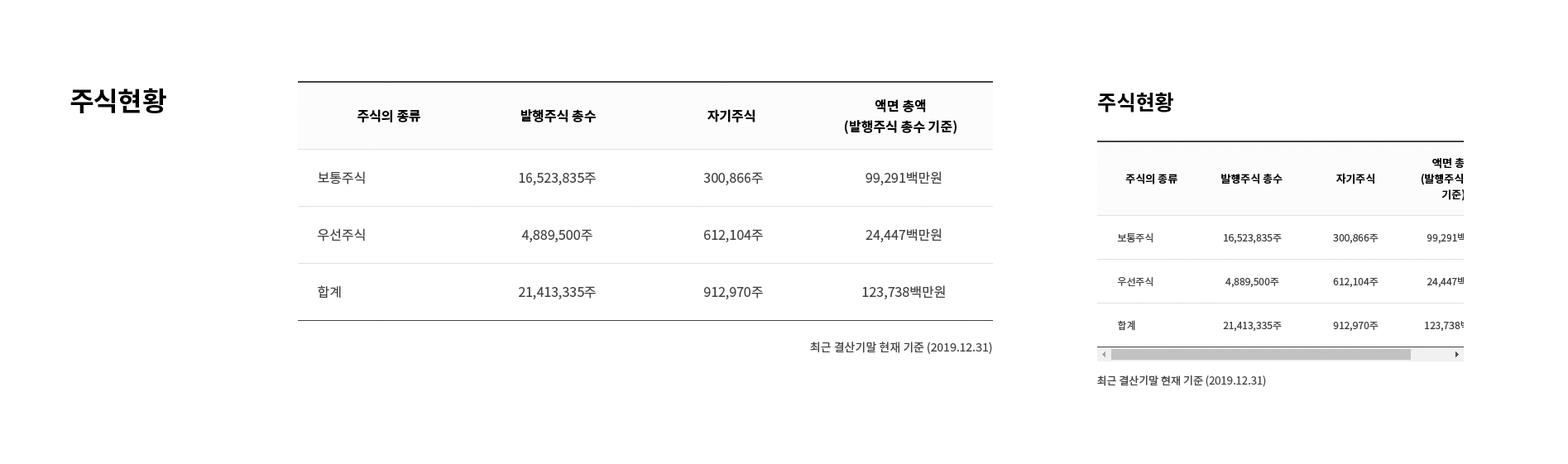
<style>
.page{position:relative;width:1568px;height:464px;background:#ffffff}
.page>*{position:absolute;margin:0}
.t1{font:26.5px "NotoSansKR-Bold";color:#040000}
.t2{font:13.2px/20.7px "NotoSansKR-Bold";color:#040000}
.t3{font:20.7px "NotoSansKR-Bold";color:#040000}
.t4{font:13.2px "NotoSansKR-Bold";color:#040000}
.t5{font:10.8px/15.7px "NotoSansKR-Bold";color:#040000}
.t6{font:13.2px/57.1px "NotoSansKR-Regular";color:#434343}
.t7{font:10.8px "NotoSansKR-Bold";color:#040000}
.t8{font:9.9px/43.9px "NotoSansKR-Regular";color:#434343}
.t9{font:9.9px/43.9px "NotoSansKR-Regular"}
.t10{font:11.6px "NotoSansKR-Regular";color:#434343}
.t11{font:10.8px "NotoSansKR-Regular";color:#434343}
</style>
<div class="page">
<p class="t1" style="left:70px;top:88px;width:96px;height:25px">주식현황</p>
<p class="t2" style="left:845px;top:99px;width:112px;height:35px;text-align:center">액면 총액<br>(발행주식 총수 기준)</p>
<p class="t3" style="left:1098px;top:92px;width:75px;height:21px">주식현황</p>
<p class="t4" style="left:357px;top:109px;width:63px;height:13px">주식의 종류</p>
<p class="t4" style="left:520px;top:109px;width:76px;height:13px">발행주식 총수</p>
<p class="t4" style="left:707px;top:109px;width:48px;height:13px">자기주식</p>
<p class="t5" style="left:1422px;top:158px;width:64px;height:43px;text-align:center">액면 총액<br>(발행주식 총수<br>기준)</p>
<p class="t6" style="left:317px;top:171px;width:48px;height:127px;text-align:justify">보통주식<br>우선주식<br>합계</p>
<p class="t6" style="left:519px;top:172px;width:77px;height:128px;text-align:center">16,523,835주<br>4,889,500주<br>21,413,335주</p>
<p class="t6" style="left:703px;top:172px;width:60px;height:128px;text-align:center">300,866주<br>612,104주<br>912,970주</p>
<p class="t6" style="left:862px;top:171px;width:83px;height:129px;text-align:center">99,291백만원<br>24,447백만원<br>123,738백만원</p>
<p class="t7" style="left:1125px;top:174px;width:52px;height:11px">주식의 종류</p>
<p class="t7" style="left:1221px;top:174px;width:62px;height:10px">발행주식 총수</p>
<p class="t7" style="left:1336px;top:173px;width:38px;height:12px">자기주식</p>
<p class="t8" style="left:1117px;top:233px;width:36px;height:98px;text-align:justify">보통주식<br>우선주식<br>합계</p>
<p class="t9" style="left:1425px;top:233px;width:62px;height:99px;text-align:center">99,291백만원<br>24,447백만원<br>123,738백만원</p>
<p class="t8" style="left:1223px;top:234px;width:59px;height:98px;text-align:center">16,523,835주<br>4,889,500주<br>21,413,335주</p>
<p class="t8" style="left:1333px;top:234px;width:46px;height:98px;text-align:center">300,866주<br>612,104주<br>912,970주</p>
<p class="t10" style="left:810px;top:342px;width:182px;height:12px">최근 결산기말 현재 기준 (2019.12.31)</p>
<p class="t11" style="left:1097px;top:375px;width:169px;height:12px">최근 결산기말 현재 기준 (2019.12.31)</p>
</div>
